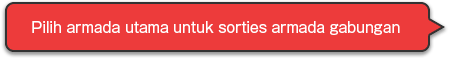
<style>
.page{position:relative;width:450px;height:58px;background:#ed3b3b}
.page>*{position:absolute;margin:0}
.t1{font:14px "GothicMB101Pro-Regular";color:#ffffff}
</style>
<div class="page">
<p class="t1" style="left:32px;top:21px;width:368px;height:14px">Pilih armada utama untuk sorties armada gabungan</p>
</div>
